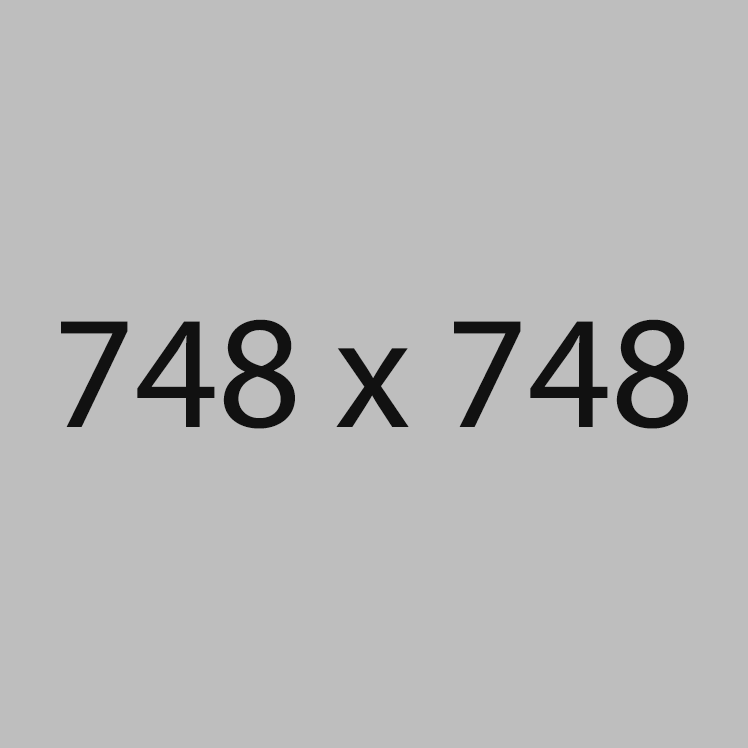
<style>
.page{position:relative;width:748px;height:748px;background:#bebebe}
.page>*{position:absolute;margin:0}
.t1{font:162px "MyriadPro-Regular";color:#111111}
</style>
<div class="page">
<p class="t1" style="left:61px;top:319px;width:627px;height:110px">748 x 748</p>
</div>
